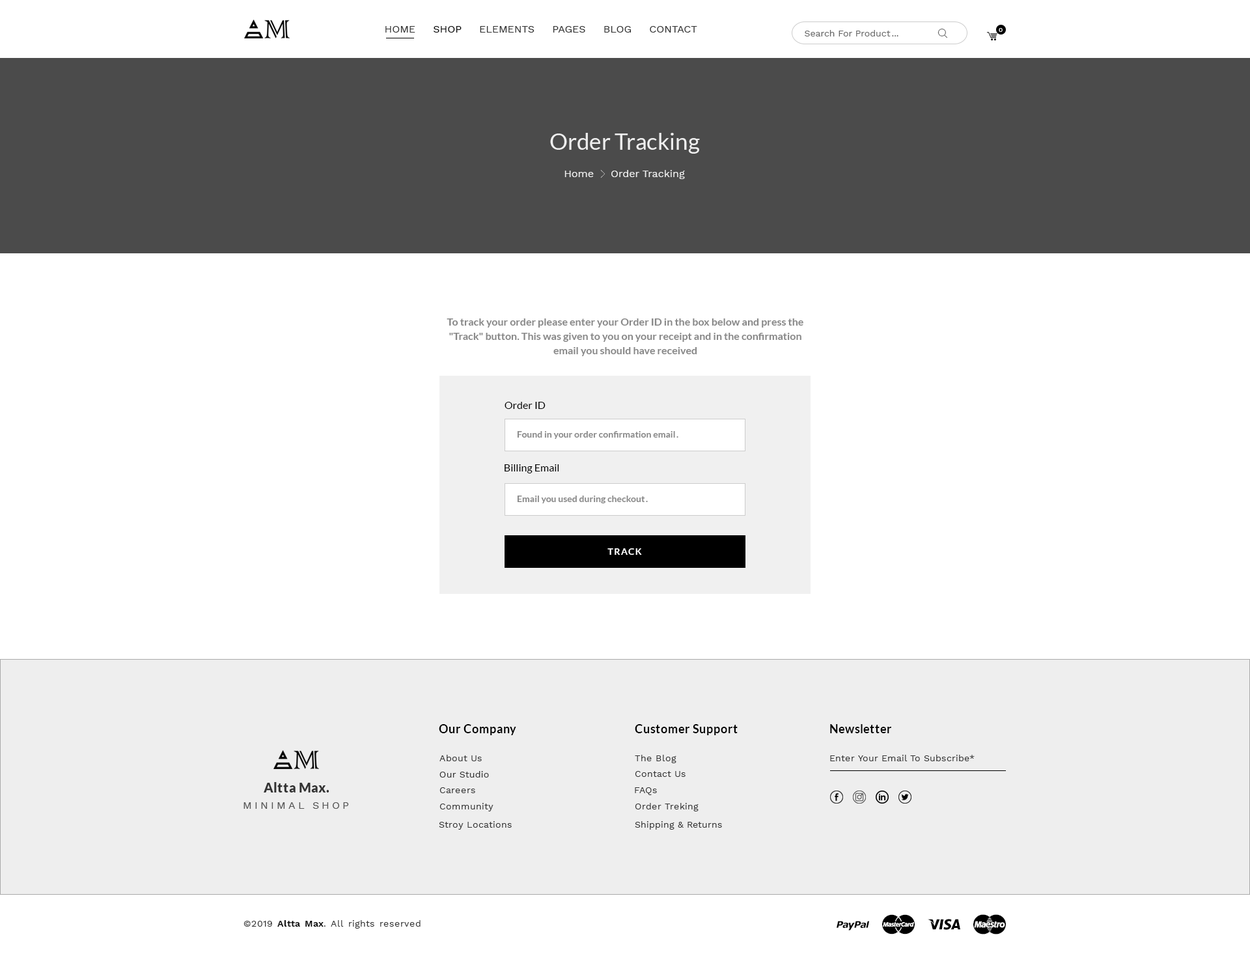
<style>
.page{position:relative;width:1250px;height:954px;background:#ffffff}
.page>*{position:absolute;margin:0}
.t1{font:10.4px "WorkSans-Regular";color:#333333}
.t2{font:10.4px "WorkSans-Regular";color:#000000}
.t3{font:9.1px "WorkSans-Regular";color:#666666}
.t4{font:6.5px "WorkSans-Regular";color:#ffffff}
.t5{font:22.8px "Lato-Regular";color:#eeeeee}
.t6{font:10.4px "WorkSans-Regular";color:#eeeeee}
.t7{font:10.4px/14.3px "Lato-Bold";color:#888888}
.t8{font:10.4px "Lato-Regular";color:#000000}
.t9{font:9.1px "Lato-Bold";color:#888888}
.t10{font:9.1px "Lato-Bold";letter-spacing:0.1em;color:#ffffff}
.t11{font:11.7px "Lato-Bold";letter-spacing:0.03em;color:#000000}
.t12{font:9.1px "WorkSans-Regular";letter-spacing:0.03em;color:#333333}
.t13{font:13px "Lato-Black";letter-spacing:0.03em;color:#333333}
.t14{font:10.4px "WorkSans-Regular";letter-spacing:0.25em;color:#555555}
.t15{font:9.1px "WorkSans-SemiBold";letter-spacing:0.03em;color:#000000}
</style>
<div class="page">
<p class="t1" style="left:385px;top:26px;width:312px;height:7px">HOME     <span class="t2">SHOP</span>     ELEMENTS     PAGES     BLOG     CONTACT</p>
<p class="t3" style="left:805px;top:30px;width:86px;height:6px">Search For Product</p>
<p class="t4" style="left:999px;top:28px;width:4px;height:4px">0</p>
<p class="t3" style="left:892px;top:35px;width:7px;height:1px">...</p>
<p class="t5" style="left:550px;top:133px;width:150px;height:21px">Order Tracking</p>
<p class="t6" style="left:565px;top:171px;width:29px;height:6px">Home</p>
<p class="t6" style="left:611px;top:170px;width:74px;height:9px">Order Tracking</p>
<p class="t7" style="left:447px;top:318px;width:356px;height:38px;text-align:center">To track your order please enter your Order ID in the box below and press the "Track" button. This was given to you on your receipt and in the confirmation email you should have received</p>
<p class="t8" style="left:505px;top:402px;width:41px;height:7px">Order ID</p>
<p class="t9" style="left:517px;top:431px;width:158px;height:8px">Found in your order confirmation email</p>
<p class="t9" style="left:676px;top:436px;width:2px;height:2px">.</p>
<p class="t8" style="left:505px;top:464px;width:54px;height:9px">Billing Email</p>
<p class="t9" style="left:517px;top:495px;width:128px;height:8px">Email you used during checkout</p>
<p class="t9" style="left:646px;top:501px;width:2px;height:1px">.</p>
<p class="t10" style="left:607px;top:548px;width:35px;height:7px">TRACK</p>
<p class="t11" style="left:439px;top:724px;width:77px;height:11px">Our Company</p>
<p class="t11" style="left:635px;top:724px;width:103px;height:11px">Customer Support</p>
<p class="t11" style="left:830px;top:724px;width:61px;height:9px">Newsletter</p>
<p class="t12" style="left:439px;top:755px;width:43px;height:6px">About Us</p>
<p class="t12" style="left:635px;top:755px;width:41px;height:8px">The Blog</p>
<p class="t12" style="left:830px;top:755px;width:145px;height:6px">Enter Your Email To Subscribe*</p>
<p class="t12" style="left:439px;top:771px;width:50px;height:6px">Our Studio</p>
<p class="t12" style="left:635px;top:771px;width:51px;height:6px">Contact Us</p>
<p class="t13" style="left:264px;top:782px;width:65px;height:10px">Altta Max.</p>
<p class="t12" style="left:439px;top:787px;width:36px;height:6px">Careers</p>
<p class="t12" style="left:635px;top:787px;width:22px;height:8px">FAQs</p>
<p class="t14" style="left:244px;top:802px;width:105px;height:7px">MINIMAL SHOP</p>
<p class="t12" style="left:439px;top:803px;width:55px;height:8px">Community</p>
<p class="t12" style="left:635px;top:803px;width:64px;height:8px">Order Treking</p>
<p class="t12" style="left:439px;top:821px;width:73px;height:9px">Stroy Locations</p>
<p class="t12" style="left:635px;top:821px;width:87px;height:9px">Shipping &amp; Returns</p>
<p class="t12" style="left:244px;top:920px;width:177px;height:8px">©2019 <span class="t15">Altta Max</span>. All rights reserved</p>
</div>
